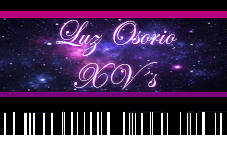
<style>
.page{position:relative;width:227px;height:142px;background:#000000}
.page>*{position:absolute;margin:0}
.t1{font:36px "EdwardianScriptITC";color:#f2f2f8;scale:0.95 1}
</style>
<div class="page">
<p class="t1" style="left:55px;top:20px;width:122px;height:70px;text-align:center">Luz Osorio<br>XV´s</p>
</div>
